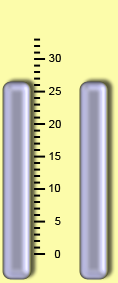
<style>
.page{position:relative;width:118px;height:283px;background:#fcfcaa}
.page>*{position:absolute;margin:0}
.t1{font:11.4px "ArialMT";color:#040404}
</style>
<div class="page">
<p class="t1" style="left:49px;top:54px;width:12px;height:8px">30</p>
<p class="t1" style="left:49px;top:87px;width:12px;height:8px">25</p>
<p class="t1" style="left:49px;top:120px;width:12px;height:8px">20</p>
<p class="t1" style="left:49px;top:152px;width:12px;height:8px">15</p>
<p class="t1" style="left:49px;top:184px;width:12px;height:8px">10</p>
<p class="t1" style="left:55px;top:217px;width:6px;height:8px">5</p>
<p class="t1" style="left:54px;top:250px;width:7px;height:8px">0</p>
</div>
